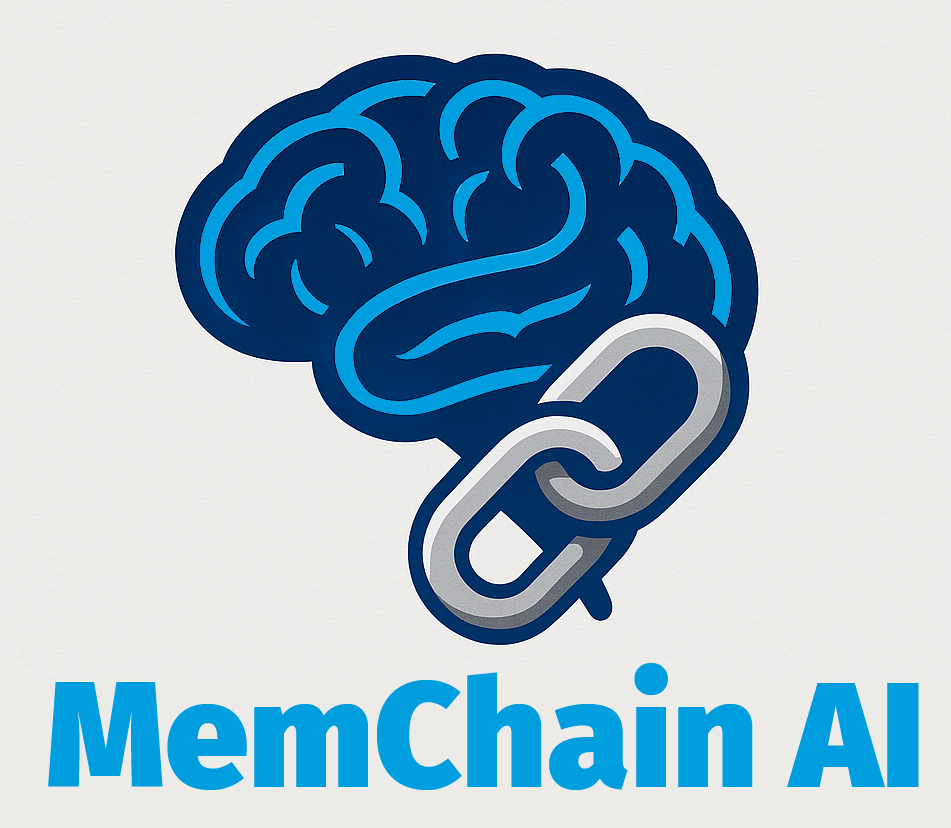
<style>
.page{position:relative;width:951px;height:828px}
.page>*{position:absolute;margin:0}
.t1{font:150px "FiraSans-Black";color:#009ede}
</style>
<div class="page">
<p class="t1" style="left:48px;top:663px;width:871px;height:127px">MemChain AI</p>
</div>
